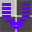
<style>
.page{position:relative;width:32px;height:32px;background:#4a4545}
.page>*{position:absolute;margin:0}
.t1{font:36px "ArcadeClassic";letter-spacing:0.02em;color:#6000ff;font-weight:bold}
</style>
<div class="page">
<p class="t1" style="left:2px;top:3px;width:28px;height:26px">V</p>
</div>
